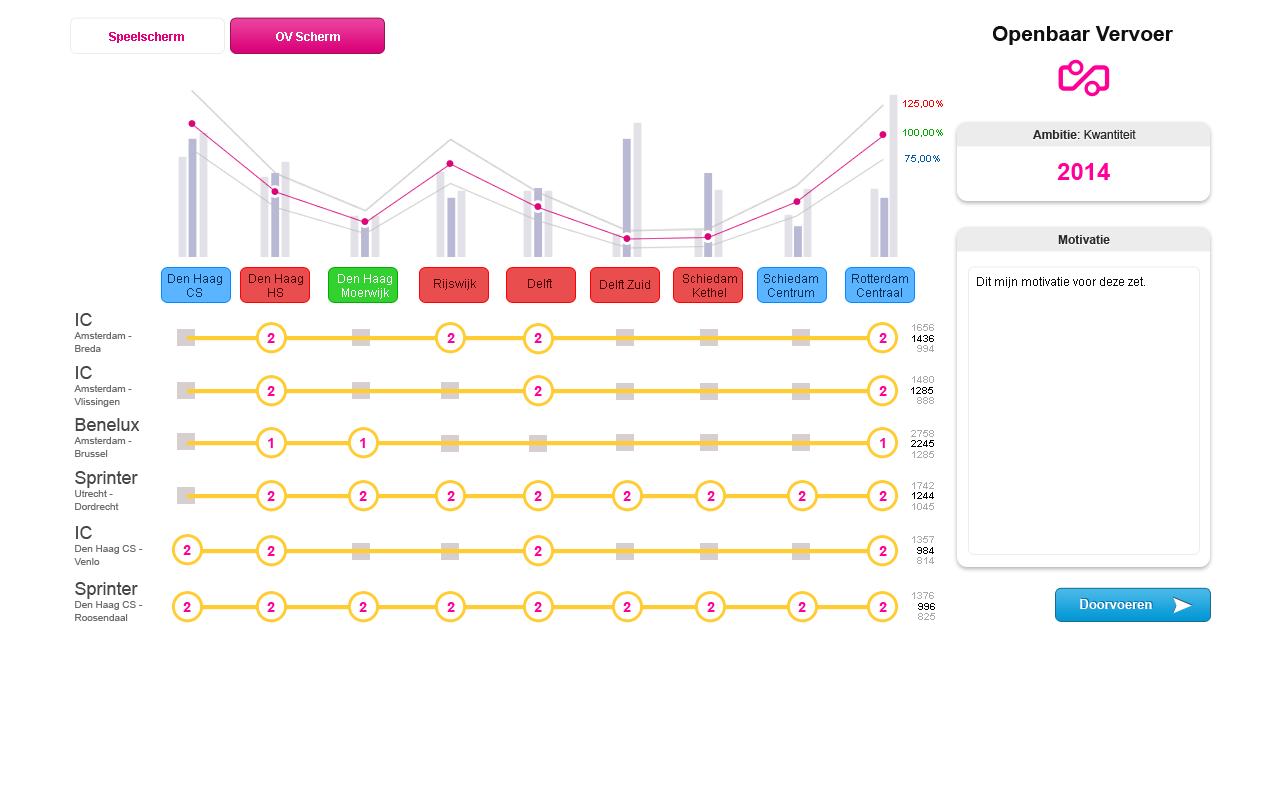
<style>
.page{position:relative;width:1280px;height:800px;background:#ffffff}
.page>*{position:absolute;margin:0}
.t1{font:21px "Arial-BoldMT";color:#0f0f0f}
.t2{font:12px "Arial-BoldMT";color:#e6007e}
.t3{font:12px "Arial-BoldMT";color:#ffffff}
.t4{font:10px "ArialMT";color:#fe0000}
.t5{font:10px "ArialMT";color:#04aa00}
.t6{font:12px "ArialMT";color:#292929}
.t7{font:12px "Arial-BoldMT";color:#292929}
.t8{font:10px "ArialMT";color:#005caa}
.t9{font:24px "Arial-BoldMT";color:#ff0097}
.t10{font:12px "ArialMT";color:#073255}
.t11{font:12px "ArialMT";color:#490000}
.t12{font:12px "ArialMT";color:#ffffff}
.t13{font:12px "ArialMT";color:#320000}
.t14{font:12px "ArialMT";color:#0f0f0f}
.t15{font:10px/13px "ArialMT";color:#6c6c6c}
.t16{font:18px "ArialMT";color:#474747}
.t17{font:10px "Arial-BoldMT";color:#a9a9a9}
.t18{font:14px "Arial-BoldMT";color:#ff0097}
.t19{font:10px "Arial-BoldMT";color:#000000}
.t20{font:13px "Arial-BoldMT";color:#ffffff}
</style>
<div class="page">
<p class="t1" style="left:993px;top:26px;width:180px;height:19px">Openbaar Vervoer</p>
<p class="t2" style="left:109px;top:32px;width:75px;height:11px">Speelscherm</p>
<p class="t3" style="left:276px;top:32px;width:64px;height:9px">OV Scherm</p>
<p class="t4" style="left:903px;top:100px;width:40px;height:8px">125,00%</p>
<p class="t5" style="left:903px;top:129px;width:40px;height:8px">100,00%</p>
<p class="t6" style="left:1033px;top:130px;width:103px;height:9px"><span class="t7">Ambitie</span>: Kwantiteit</p>
<p class="t8" style="left:905px;top:155px;width:35px;height:8px">75,00%</p>
<p class="t9" style="left:1057px;top:163px;width:53px;height:17px">2014</p>
<p class="t7" style="left:1058px;top:235px;width:52px;height:9px">Motivatie</p>
<p class="t10" style="left:168px;top:274px;width:54px;height:23px;text-align:center">Den Haag CS</p>
<p class="t11" style="left:249px;top:274px;width:54px;height:23px;text-align:center">Den Haag HS</p>
<p class="t12" style="left:338px;top:274px;width:54px;height:25px;text-align:center">Den Haag Moerwijk</p>
<p class="t11" style="left:434px;top:279px;width:42px;height:11px">Rijswijk</p>
<p class="t11" style="left:528px;top:279px;width:24px;height:9px">Delft</p>
<p class="t11" style="left:600px;top:280px;width:50px;height:9px">Delft Zuid</p>
<p class="t13" style="left:683px;top:274px;width:54px;height:23px;text-align:center">Schiedam Kethel</p>
<p class="t10" style="left:764px;top:274px;width:54px;height:23px;text-align:center">Schiedam Centrum</p>
<p class="t10" style="left:852px;top:274px;width:56px;height:23px;text-align:center">Rotterdam Centraal</p>
<p class="t14" style="left:977px;top:277px;width:168px;height:11px">Dit mijn motivatie voor deze zet.</p>
<p class="t15" style="left:74px;top:313px;width:58px;height:39px"><span class="t16">IC<br></span>Amsterdam -<br>Breda</p>
<p class="t17" style="left:912px;top:324px;width:22px;height:7px">1656</p>
<p class="t18" style="left:267px;top:333px;width:8px;height:10px">2</p>
<p class="t18" style="left:447px;top:333px;width:8px;height:10px">2</p>
<p class="t18" style="left:534px;top:333px;width:8px;height:10px">2</p>
<p class="t18" style="left:879px;top:333px;width:8px;height:10px">2</p>
<p class="t19" style="left:912px;top:335px;width:22px;height:7px">1436</p>
<p class="t17" style="left:917px;top:345px;width:17px;height:7px">994</p>
<p class="t15" style="left:74px;top:366px;width:58px;height:41px"><span class="t16">IC<br></span>Amsterdam -<br>Vlissingen</p>
<p class="t17" style="left:912px;top:376px;width:22px;height:7px">1480</p>
<p class="t18" style="left:267px;top:386px;width:8px;height:10px">2</p>
<p class="t18" style="left:534px;top:386px;width:8px;height:10px">2</p>
<p class="t18" style="left:879px;top:386px;width:8px;height:10px">2</p>
<p class="t19" style="left:911px;top:387px;width:22px;height:7px">1285</p>
<p class="t17" style="left:917px;top:397px;width:17px;height:7px">888</p>
<p class="t15" style="left:74px;top:418px;width:66px;height:39px"><span class="t16">Benelux<br></span>Amsterdam -<br>Brussel</p>
<p class="t18" style="left:268px;top:438px;width:5px;height:10px">1</p>
<p class="t18" style="left:360px;top:438px;width:5px;height:10px">1</p>
<p class="t18" style="left:880px;top:438px;width:5px;height:10px">1</p>
<p class="t17" style="left:911px;top:430px;width:23px;height:7px">2758</p>
<p class="t19" style="left:911px;top:440px;width:23px;height:7px">2245</p>
<p class="t17" style="left:912px;top:451px;width:22px;height:7px">1285</p>
<p class="t15" style="left:75px;top:471px;width:63px;height:39px"><span class="t16">Sprinter<br></span>Utrecht -<br>Dordrecht</p>
<p class="t17" style="left:912px;top:482px;width:22px;height:7px">1742</p>
<p class="t18" style="left:267px;top:491px;width:8px;height:10px">2</p>
<p class="t18" style="left:359px;top:491px;width:8px;height:10px">2</p>
<p class="t18" style="left:447px;top:491px;width:8px;height:10px">2</p>
<p class="t18" style="left:534px;top:491px;width:8px;height:10px">2</p>
<p class="t18" style="left:623px;top:491px;width:8px;height:10px">2</p>
<p class="t18" style="left:707px;top:491px;width:8px;height:10px">2</p>
<p class="t18" style="left:798px;top:491px;width:8px;height:10px">2</p>
<p class="t18" style="left:879px;top:491px;width:8px;height:10px">2</p>
<p class="t19" style="left:912px;top:492px;width:22px;height:7px">1244</p>
<p class="t17" style="left:912px;top:503px;width:22px;height:7px">1045</p>
<p class="t15" style="left:74px;top:526px;width:69px;height:39px"><span class="t16">IC<br></span>Den Haag CS -<br>Venlo</p>
<p class="t18" style="left:183px;top:545px;width:8px;height:10px">2</p>
<p class="t17" style="left:912px;top:536px;width:22px;height:7px">1357</p>
<p class="t18" style="left:267px;top:546px;width:8px;height:10px">2</p>
<p class="t18" style="left:534px;top:546px;width:8px;height:10px">2</p>
<p class="t18" style="left:879px;top:546px;width:8px;height:10px">2</p>
<p class="t17" style="left:917px;top:557px;width:17px;height:7px">814</p>
<p class="t19" style="left:917px;top:547px;width:17px;height:7px">984</p>
<p class="t15" style="left:75px;top:582px;width:68px;height:39px"><span class="t16">Sprinter<br></span>Den Haag CS -<br>Roosendaal</p>
<p class="t17" style="left:912px;top:592px;width:22px;height:7px">1376</p>
<p class="t18" style="left:183px;top:602px;width:8px;height:10px">2</p>
<p class="t18" style="left:267px;top:602px;width:8px;height:10px">2</p>
<p class="t18" style="left:359px;top:602px;width:8px;height:10px">2</p>
<p class="t18" style="left:447px;top:602px;width:8px;height:10px">2</p>
<p class="t18" style="left:534px;top:602px;width:8px;height:10px">2</p>
<p class="t18" style="left:623px;top:602px;width:8px;height:10px">2</p>
<p class="t18" style="left:707px;top:602px;width:8px;height:10px">2</p>
<p class="t18" style="left:798px;top:602px;width:8px;height:10px">2</p>
<p class="t18" style="left:879px;top:602px;width:8px;height:10px">2</p>
<p class="t19" style="left:918px;top:603px;width:17px;height:7px">996</p>
<p class="t20" style="left:1080px;top:599px;width:72px;height:10px">Doorvoeren</p>
<p class="t17" style="left:918px;top:613px;width:17px;height:7px">825</p>
</div>
